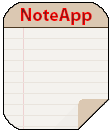
<style>
.page{position:relative;width:112px;height:132px;background:#f4f2ee}
.page>*{position:absolute;margin:0}
.t1{font:18px "MyriadPro-Bold"}
</style>
<div class="page">
<p class="t1" style="left:21px;top:8px;width:71px;height:17px">NoteApp</p>
</div>
